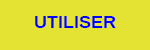
<style>
.page{position:relative;width:150px;height:50px;background:#e4e232}
.page>*{position:absolute;margin:0}
.t1{font:18px "Arimo-Bold";color:#0000fe}
</style>
<div class="page">
<p class="t1" style="left:35px;top:16px;width:81px;height:12px">UTILISER</p>
</div>
